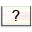
<style>
.page{position:relative;width:32px;height:32px;background:#ffffff}
.page>*{position:absolute;margin:0}
.t1{font:14.9px "ArialMT";color:#000000}
</style>
<div class="page">
<p class="t1" style="left:12px;top:10px;width:8px;height:11px">?</p>
</div>
